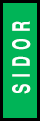
<style>
.page{position:relative;width:40px;height:121px;background:#00b457}
.page>*{position:absolute;margin:0}
.t1{font:24.2px "Helvetica-Bold";letter-spacing:0.424em;color:#ffffff;scale:0.62 1}
</style>
<div class="page">
<p class="t1" style="left:12px;top:21px;width:19px;height:73px;rotate:-90deg">SIDOR</p>
</div>
